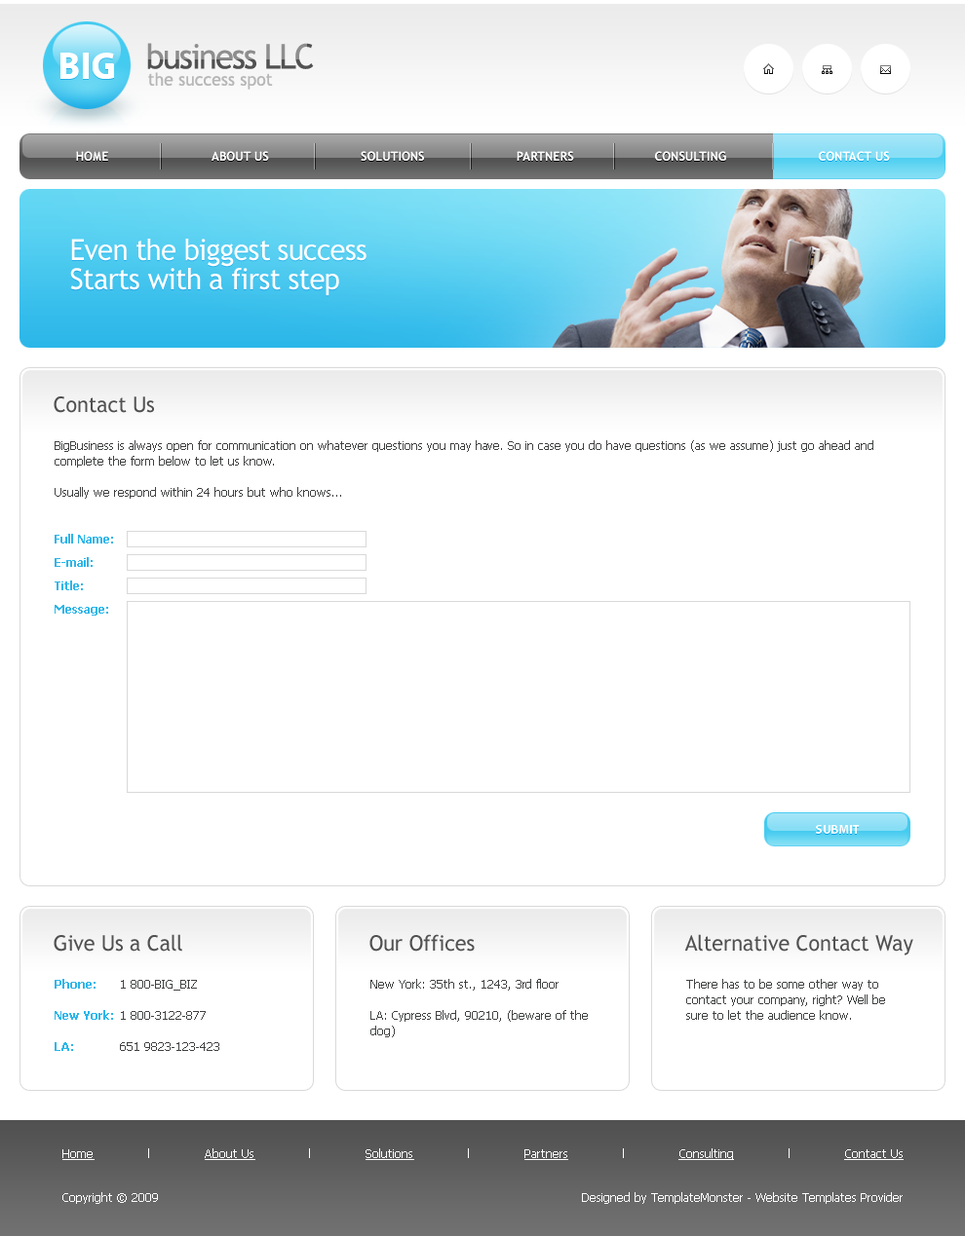
<style>
.page{position:relative;width:965px;height:1236px;background:#ffffff}
.page>*{position:absolute;margin:0}
.t1{font:34.1px "TrebuchetMS";letter-spacing:-0.05em}
.t2{font:17.5px "TrebuchetMS";color:#b7b7b7}
.t3{font:12.7px "TrebuchetMS-Bold";color:#ffffff;scale:0.96 1}
.t4{font:29.2px/29.2px "TrebuchetMS";letter-spacing:-0.025em;color:#ffffff}
.t5{font:21.4px "TrebuchetMS";color:#515151}
.t6{font:11.7px/15.6px "Tahoma";color:#404141}
.t7{font:11.7px/15.6px "Tahoma-Bold";color:#2cb6e9}
.t8{font:11.7px/23.4px "Tahoma-Bold";color:#2cb6e9}
.t9{font:12.7px "MyriadPro-Bold";color:#ffffff;text-transform:uppercase;scale:0.96 1}
.t10{font:11.7px "Tahoma";color:#ffffff;text-decoration:underline}
.t11{font:11.7px "Tahoma";color:#ffffff}
</style>
<div class="page">
<p class="t1" style="left:147px;top:43px;width:167px;height:26px">business LLC</p>
<p class="t2" style="left:148px;top:72px;width:125px;height:18px">the success spot</p>
<p class="t3" style="left:76px;top:151px;width:813px;height:10px">HOME                            ABOUT US                         SOLUTIONS                         PARTNERS                      CONSULTING                         CONTACT US</p>
<p class="t4" style="left:70px;top:239px;width:296px;height:57px">Even the biggest success<br>Starts with a first step</p>
<p class="t5" style="left:54px;top:397px;width:100px;height:16px">Contact Us</p>
<p class="t6" style="left:55px;top:440px;width:818px;height:176px">BigBusiness is always open for communication on whatever questions you may have. So in case you do have questions (as we assume) just go ahead and complete the form below to let us know.<br><br>Usually we respond within 24 hours but who knows...<br><br><br><span class="t7">Full Name:<br></span><span class="t8">E-mail:<br>Title:<br>Message:</span></p>
<p class="t9" style="left:815px;top:825px;width:44px;height:9px">Submit</p>
<p class="t5" style="left:54px;top:934px;width:128px;height:18px">Give Us a Call</p>
<p class="t5" style="left:369px;top:934px;width:105px;height:18px">Our Offices</p>
<p class="t5" style="left:684px;top:934px;width:229px;height:22px">Alternative Contact Way</p>
<p class="t7" style="left:55px;top:979px;width:58px;height:72px">Phone:<br><br>New York:<br><br>LA:</p>
<p class="t6" style="left:120px;top:980px;width:99px;height:71px">1 800-BIG_BIZ<br><br>1 800-3122-877<br><br>651 9823-123-423</p>
<p class="t6" style="left:370px;top:979px;width:217px;height:59px">New York: 35th st., 1243, 3rd floor<br><br>LA: Cypress Blvd, 90210, (beware of the dog)</p>
<p class="t6" style="left:686px;top:979px;width:199px;height:41px">There has to be some other way to contact your company, right? Well be sure to let the audience know.</p>
<p class="t10" style="left:62px;top:1149px;width:841px;height:11px">Home<span class="t11">              l              </span>About Us<span class="t11">              l              </span>Solutions<span class="t11">              l              </span>Partners<span class="t11">              l              </span>Consulting<span class="t11">              l              </span>Contact Us</p>
<p class="t11" style="left:62px;top:1192px;width:96px;height:12px">Copyright © 2009</p>
<p class="t11" style="left:582px;top:1192px;width:320px;height:12px">Designed by TemplateMonster - Website Templates Provider</p>
</div>
